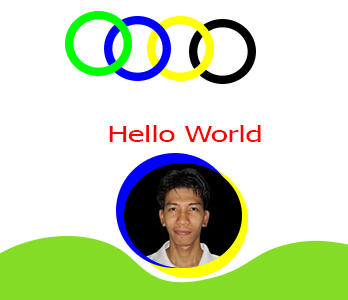
<style>
.page{position:relative;width:348px;height:300px;background:#ffffff}
.page>*{position:absolute;margin:0}
.t1{font:22.2px "Tahoma";color:#ff0000;scale:1.38 1}
</style>
<div class="page">
<p class="t1" style="left:109px;top:125px;width:152px;height:17px">Hello World</p>
</div>
